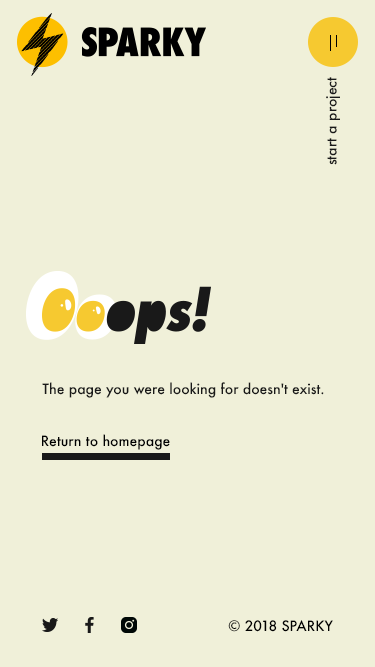
<style>
.page{position:relative;width:375px;height:667px;background:#f0f0d9}
.page>*{position:absolute;margin:0}
.t1{font:14px "Futura-Medium";color:#191919}
.t2{font:14px "Futura-Medium";color:#000000}
</style>
<div class="page">
<p class="t1" style="left:326px;top:77px;width:14px;height:88px;rotate:-90deg">start a project</p>
<p class="t1" style="left:42px;top:382px;width:282px;height:16px">The page you were looking for doesn't exist.</p>
<p class="t2" style="left:42px;top:434px;width:128px;height:16px">Return to homepage</p>
<p class="t2" style="left:228px;top:620px;width:105px;height:12px">© 2018 SPARKY</p>
</div>
